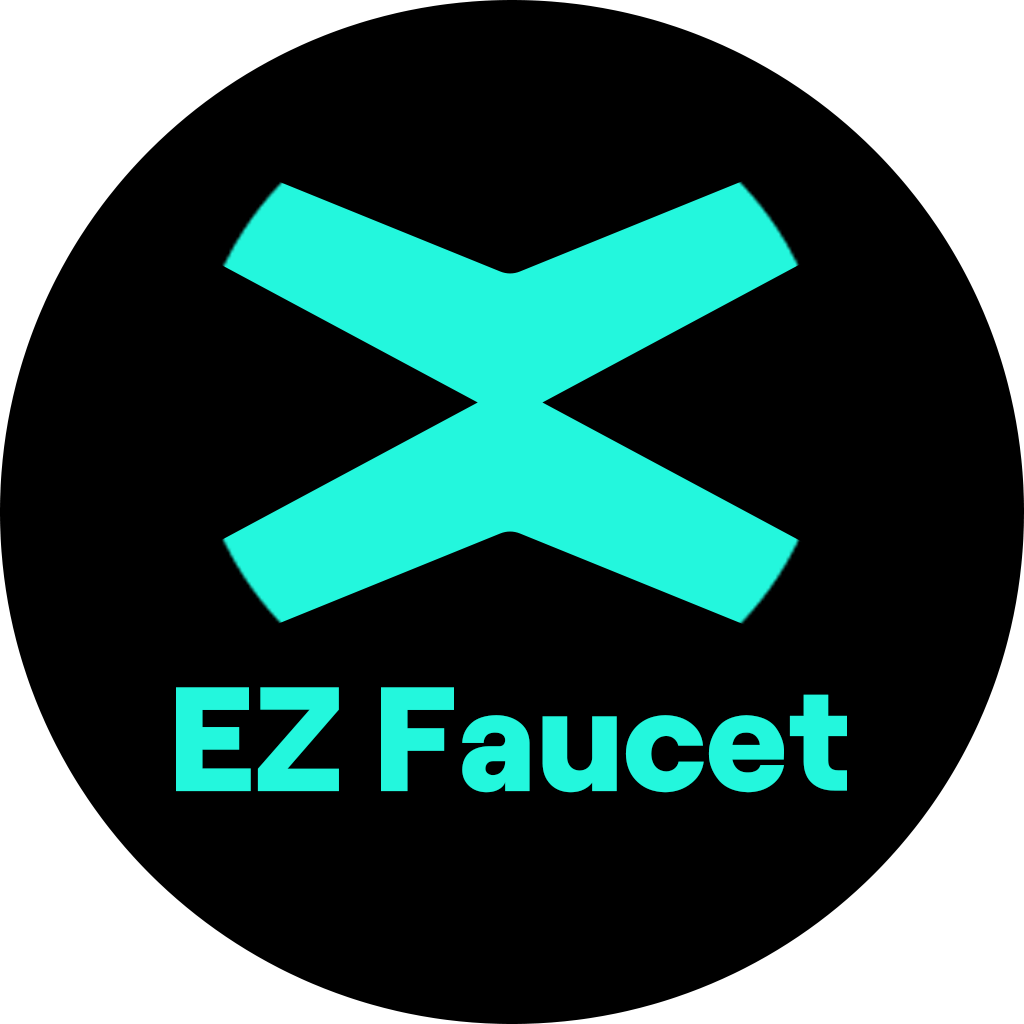
<style>
.page{position:relative;width:1024px;height:1024px;background:#000000}
.page>*{position:absolute;margin:0}
.t1{font:148px "Roobert-Heavy";color:#23f7dd}
</style>
<div class="page">
<p class="t1" style="left:176px;top:687px;width:671px;height:106px">EZ Faucet</p>
</div>
